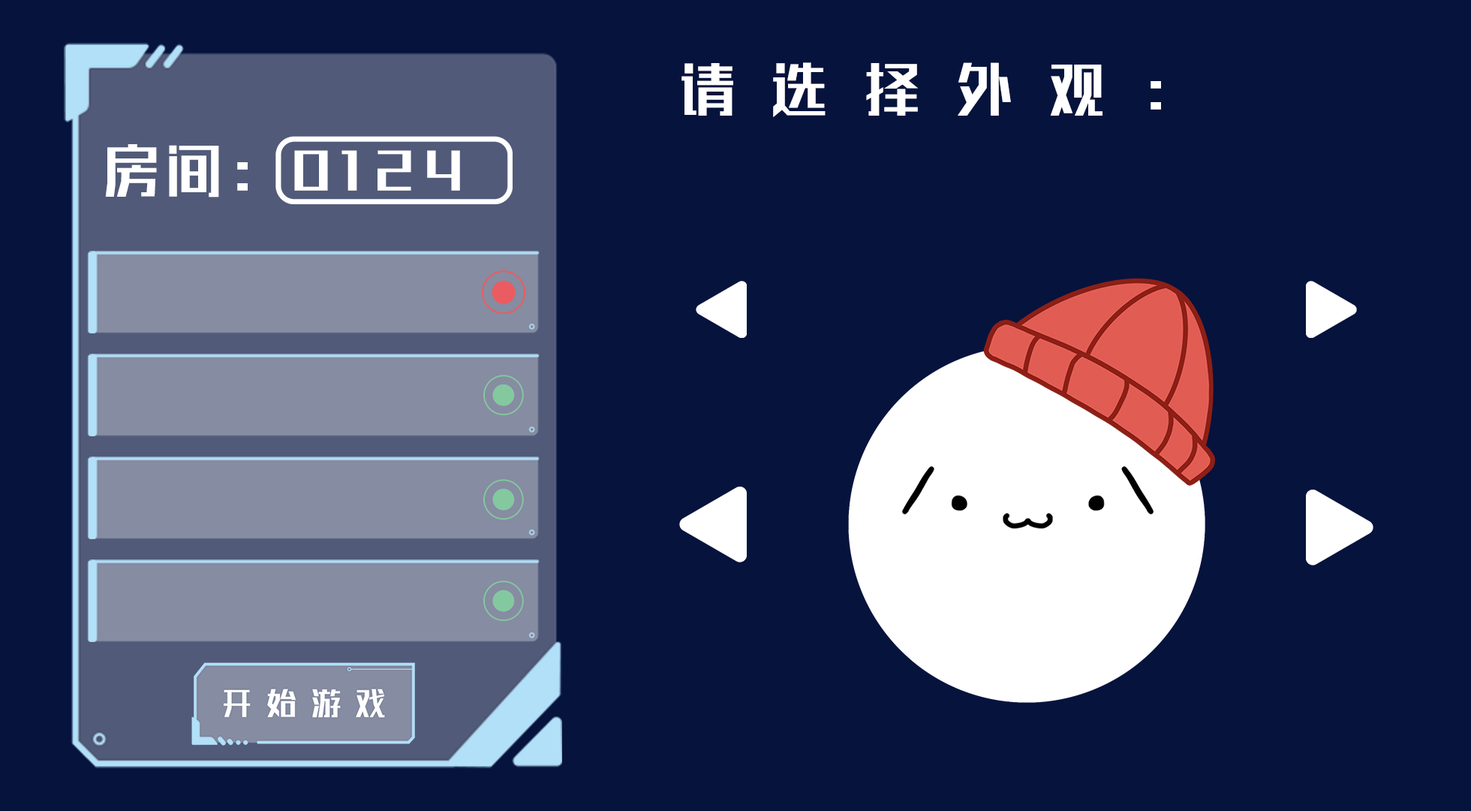
<style>
.page{position:relative;width:1471px;height:811px;background:#06133d}
.page>*{position:absolute;margin:0}
.t1{font:56.3px "REEJI-Top-BoldGBV1.0";letter-spacing:0.64em;color:#ffffff}
.t2{font:56.3px "REEJI-Top-BoldGBV1.0";letter-spacing:0.1em;color:#ffffff}
</style>
<div class="page">
<p class="t1" style="left:681px;top:62px;width:480px;height:55px">请选择外观：</p>
<p class="t2" style="left:105px;top:144px;width:355px;height:53px">房间：0124</p>
</div>
